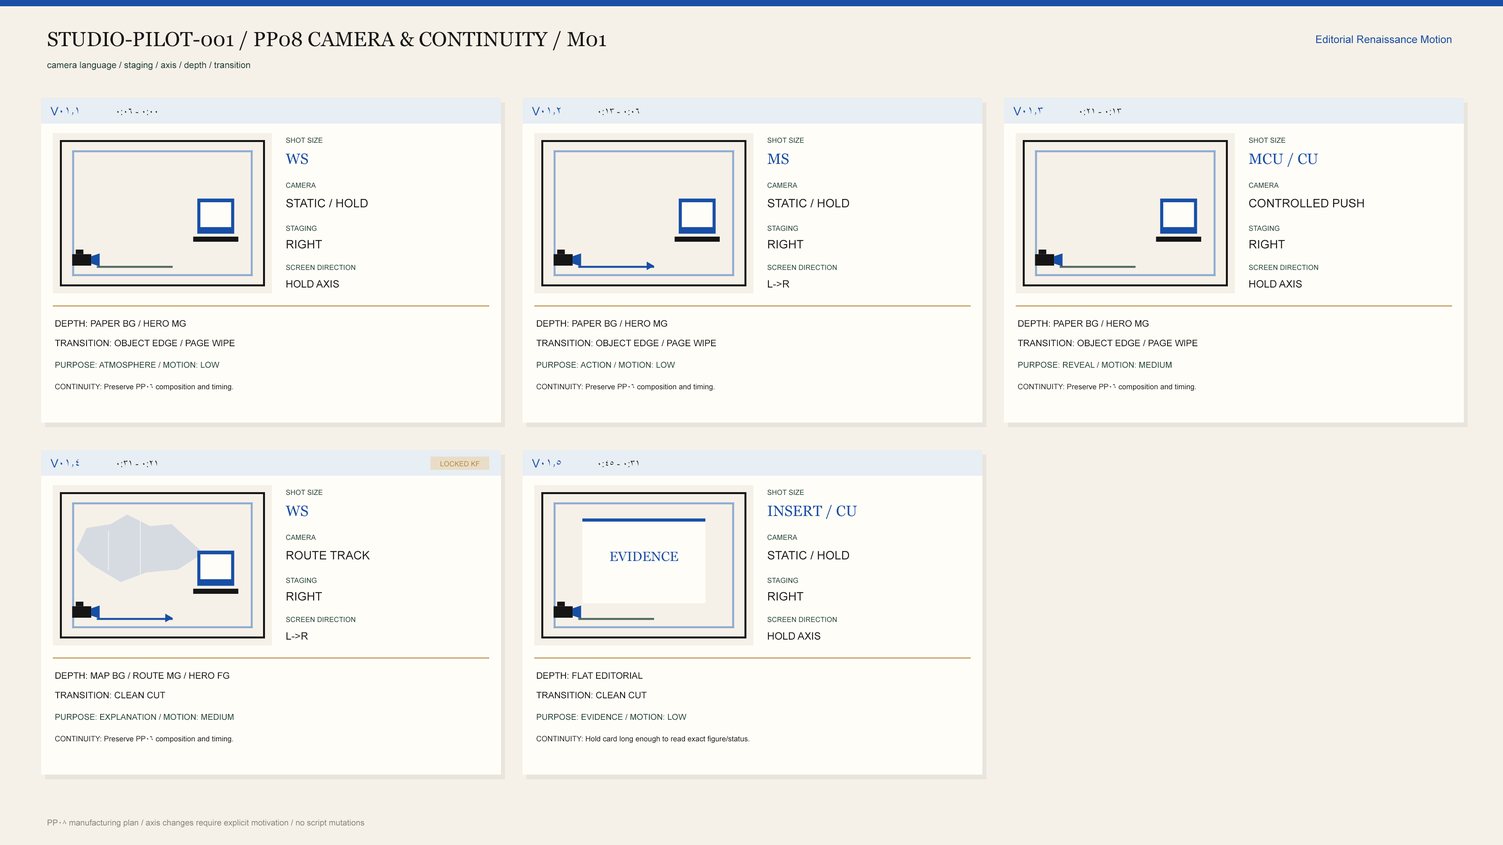
<style>
.page{position:relative;width:1503px;height:845px;background:#f6f1e8}
.page>*{position:absolute;margin:0}
.t1{font:20.3px "Georgia";color:#151515}
.t2{font:10.6px "ArialMT";color:#174fa6}
.t3{font:9px "ArialMT";color:#173c32}
.t4{font:11.7px "ArialMT";color:#174fa6}
.t5{font:9.4px "ArialMT";color:#151515}
.t6{font:7px "ArialMT";color:#173c32}
.t7{font:14.9px "Georgia";color:#174fa6}
.t8{font:11.7px "ArialMT";color:#151515}
.t9{font:10.2px "ArialMT";color:#151515}
.t10{font:9px "ArialMT";color:#151515}
.t11{font:8.2px "ArialMT";color:#173c32}
.t12{font:7.4px "ArialMT";color:#151515}
.t13{font:7px "ArialMT";color:#b58a3e}
.t14{font:13.3px "Georgia";color:#174fa6}
.t15{font:8.2px "ArialMT";color:#817f7a}
</style>
<div class="page">
<p class="t1" style="left:48px;top:31px;width:558px;height:19px">STUDIO-PILOT-001 / PP08 CAMERA &amp; CONTINUITY / M01</p>
<p class="t2" style="left:1316px;top:35px;width:135px;height:8px">Editorial Renaissance Motion</p>
<p class="t3" style="left:47px;top:61px;width:203px;height:9px">camera language / staging / axis / depth / transition</p>
<p class="t4" style="left:50px;top:107px;width:28px;height:8px">V01.1</p>
<p class="t5" style="left:117px;top:108px;width:40px;height:7px">0:00 - 0:06</p>
<p class="t4" style="left:532px;top:107px;width:28px;height:8px">V01.2</p>
<p class="t5" style="left:598px;top:108px;width:41px;height:7px">0:06 - 0:13</p>
<p class="t4" style="left:1013px;top:107px;width:29px;height:8px">V01.3</p>
<p class="t5" style="left:1080px;top:108px;width:41px;height:7px">0:13 - 0:21</p>
<p class="t6" style="left:286px;top:137px;width:36px;height:6px">SHOT SIZE</p>
<p class="t6" style="left:767px;top:137px;width:37px;height:6px">SHOT SIZE</p>
<p class="t6" style="left:1249px;top:137px;width:36px;height:6px">SHOT SIZE</p>
<p class="t7" style="left:286px;top:153px;width:22px;height:11px">WS</p>
<p class="t7" style="left:767px;top:153px;width:21px;height:11px">MS</p>
<p class="t7" style="left:1249px;top:153px;width:69px;height:14px">MCU / CU</p>
<p class="t6" style="left:286px;top:182px;width:30px;height:6px">CAMERA</p>
<p class="t6" style="left:767px;top:182px;width:30px;height:6px">CAMERA</p>
<p class="t6" style="left:1249px;top:182px;width:29px;height:6px">CAMERA</p>
<p class="t8" style="left:286px;top:199px;width:82px;height:9px">STATIC / HOLD</p>
<p class="t8" style="left:767px;top:199px;width:82px;height:9px">STATIC / HOLD</p>
<p class="t8" style="left:1249px;top:199px;width:115px;height:9px">CONTROLLED PUSH</p>
<p class="t6" style="left:286px;top:225px;width:31px;height:6px">STAGING</p>
<p class="t6" style="left:767px;top:225px;width:31px;height:6px">STAGING</p>
<p class="t6" style="left:1249px;top:225px;width:30px;height:6px">STAGING</p>
<p class="t8" style="left:286px;top:240px;width:36px;height:9px">RIGHT</p>
<p class="t8" style="left:768px;top:240px;width:35px;height:9px">RIGHT</p>
<p class="t8" style="left:1249px;top:240px;width:36px;height:9px">RIGHT</p>
<p class="t6" style="left:286px;top:265px;width:69px;height:5px">SCREEN DIRECTION</p>
<p class="t6" style="left:767px;top:265px;width:70px;height:5px">SCREEN DIRECTION</p>
<p class="t6" style="left:1249px;top:265px;width:69px;height:5px">SCREEN DIRECTION</p>
<p class="t9" style="left:286px;top:280px;width:53px;height:8px">HOLD AXIS</p>
<p class="t9" style="left:768px;top:280px;width:21px;height:8px">L-&gt;R</p>
<p class="t9" style="left:1249px;top:280px;width:52px;height:8px">HOLD AXIS</p>
<p class="t10" style="left:55px;top:320px;width:131px;height:7px">DEPTH: PAPER BG / HERO MG</p>
<p class="t10" style="left:536px;top:320px;width:131px;height:7px">DEPTH: PAPER BG / HERO MG</p>
<p class="t10" style="left:1018px;top:320px;width:130px;height:7px">DEPTH: PAPER BG / HERO MG</p>
<p class="t10" style="left:55px;top:340px;width:180px;height:7px">TRANSITION: OBJECT EDGE / PAGE WIPE</p>
<p class="t10" style="left:536px;top:340px;width:180px;height:7px">TRANSITION: OBJECT EDGE / PAGE WIPE</p>
<p class="t10" style="left:1017px;top:340px;width:180px;height:7px">TRANSITION: OBJECT EDGE / PAGE WIPE</p>
<p class="t11" style="left:55px;top:362px;width:164px;height:6px">PURPOSE: ATMOSPHERE / MOTION: LOW</p>
<p class="t11" style="left:536px;top:362px;width:139px;height:6px">PURPOSE: ACTION / MOTION: LOW</p>
<p class="t11" style="left:1018px;top:362px;width:153px;height:6px">PURPOSE: REVEAL / MOTION: MEDIUM</p>
<p class="t12" style="left:55px;top:384px;width:178px;height:7px">CONTINUITY: Preserve PP06 composition and timing.</p>
<p class="t12" style="left:536px;top:384px;width:179px;height:7px">CONTINUITY: Preserve PP06 composition and timing.</p>
<p class="t12" style="left:1018px;top:384px;width:178px;height:7px">CONTINUITY: Preserve PP06 composition and timing.</p>
<p class="t4" style="left:50px;top:459px;width:29px;height:9px">V01.4</p>
<p class="t5" style="left:117px;top:460px;width:40px;height:7px">0:21 - 0:31</p>
<p class="t13" style="left:440px;top:461px;width:39px;height:6px">LOCKED KF</p>
<p class="t4" style="left:532px;top:459px;width:29px;height:9px">V01.5</p>
<p class="t5" style="left:598px;top:460px;width:40px;height:7px">0:31 - 0:45</p>
<p class="t6" style="left:286px;top:490px;width:36px;height:5px">SHOT SIZE</p>
<p class="t6" style="left:767px;top:490px;width:37px;height:5px">SHOT SIZE</p>
<p class="t7" style="left:286px;top:506px;width:22px;height:11px">WS</p>
<p class="t7" style="left:767px;top:505px;width:90px;height:14px">INSERT / CU</p>
<p class="t6" style="left:286px;top:535px;width:30px;height:5px">CAMERA</p>
<p class="t6" style="left:767px;top:535px;width:30px;height:5px">CAMERA</p>
<p class="t8" style="left:286px;top:551px;width:84px;height:9px">ROUTE TRACK</p>
<p class="t14" style="left:610px;top:552px;width:68px;height:10px">EVIDENCE</p>
<p class="t8" style="left:767px;top:551px;width:82px;height:9px">STATIC / HOLD</p>
<p class="t6" style="left:286px;top:578px;width:31px;height:5px">STAGING</p>
<p class="t6" style="left:767px;top:578px;width:31px;height:5px">STAGING</p>
<p class="t8" style="left:286px;top:592px;width:36px;height:9px">RIGHT</p>
<p class="t8" style="left:768px;top:592px;width:35px;height:9px">RIGHT</p>
<p class="t6" style="left:286px;top:617px;width:69px;height:6px">SCREEN DIRECTION</p>
<p class="t6" style="left:767px;top:617px;width:70px;height:6px">SCREEN DIRECTION</p>
<p class="t9" style="left:286px;top:632px;width:22px;height:8px">L-&gt;R</p>
<p class="t9" style="left:768px;top:632px;width:52px;height:8px">HOLD AXIS</p>
<p class="t10" style="left:55px;top:672px;width:174px;height:7px">DEPTH: MAP BG / ROUTE MG / HERO FG</p>
<p class="t10" style="left:536px;top:672px;width:107px;height:7px">DEPTH: FLAT EDITORIAL</p>
<p class="t10" style="left:55px;top:692px;width:110px;height:7px">TRANSITION: CLEAN CUT</p>
<p class="t10" style="left:536px;top:692px;width:110px;height:7px">TRANSITION: CLEAN CUT</p>
<p class="t11" style="left:55px;top:714px;width:179px;height:6px">PURPOSE: EXPLANATION / MOTION: MEDIUM</p>
<p class="t11" style="left:536px;top:714px;width:150px;height:6px">PURPOSE: EVIDENCE / MOTION: LOW</p>
<p class="t12" style="left:55px;top:736px;width:178px;height:7px">CONTINUITY: Preserve PP06 composition and timing.</p>
<p class="t12" style="left:536px;top:736px;width:213px;height:7px">CONTINUITY: Hold card long enough to read exact figure/status.</p>
<p class="t15" style="left:47px;top:819px;width:317px;height:9px">PP08 manufacturing plan / axis changes require explicit motivation / no script mutations</p>
</div>
